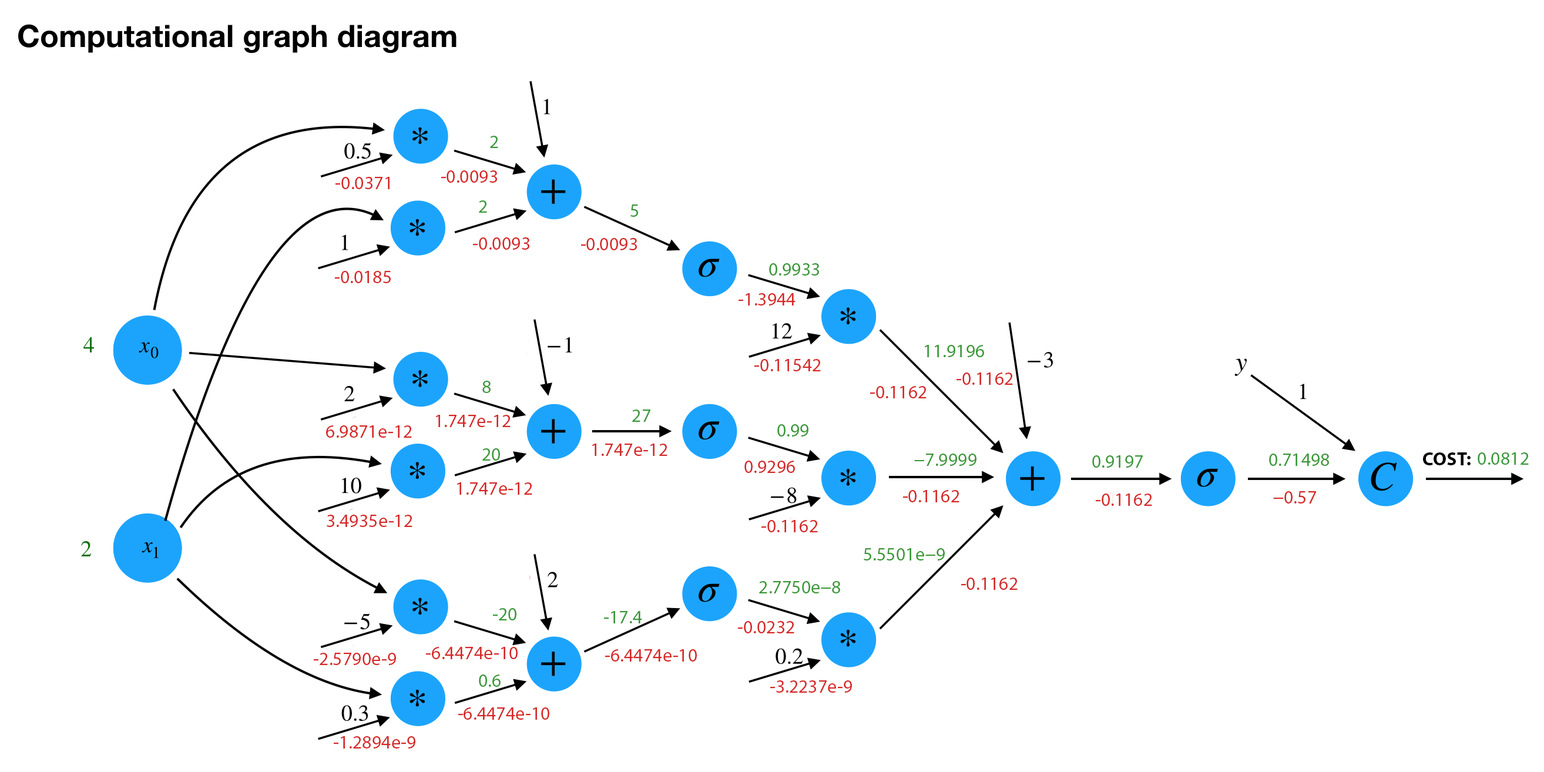
<style>
.page{position:relative;width:1544px;height:772px;background:#ffffff}
.page>*{position:absolute;margin:0}
.t1{font:18.8px "MyriadPro-Regular";color:#399837}
.t2{font:18.8px "MyriadPro-Regular";color:#d62727}
.t3{font:18.8px "MyriadPro-Bold";color:#000000}
</style>
<div class="page">
<p class="t1" style="left:490px;top:136px;width:8px;height:12px">2</p>
<p class="t2" style="left:441px;top:170px;width:56px;height:13px">-0.0093</p>
<p class="t2" style="left:336px;top:177px;width:54px;height:12px">-0.0371</p>
<p class="t1" style="left:479px;top:200px;width:8px;height:13px">2</p>
<p class="t1" style="left:631px;top:204px;width:7px;height:13px">5</p>
<p class="t2" style="left:473px;top:237px;width:56px;height:13px">-0.0093</p>
<p class="t2" style="left:581px;top:238px;width:56px;height:12px">-0.0093</p>
<p class="t1" style="left:769px;top:263px;width:50px;height:13px">0.9933</p>
<p class="t2" style="left:335px;top:271px;width:56px;height:12px">-0.0185</p>
<p class="t2" style="left:739px;top:293px;width:57px;height:13px">-1.3944</p>
<p class="t1" style="left:925px;top:345px;width:59px;height:12px">11.9196</p>
<p class="t2" style="left:755px;top:359px;width:66px;height:12px">-0.11542</p>
<p class="t2" style="left:957px;top:373px;width:56px;height:12px">-0.1162</p>
<p class="t1" style="left:482px;top:381px;width:9px;height:12px">8</p>
<p class="t2" style="left:870px;top:386px;width:57px;height:12px">-0.1162</p>
<p class="t1" style="left:632px;top:410px;width:19px;height:12px">27</p>
<p class="t2" style="left:326px;top:425px;width:86px;height:13px">6.9871e-12</p>
<p class="t2" style="left:436px;top:415px;width:75px;height:12px">1.747e-12</p>
<p class="t1" style="left:777px;top:424px;width:32px;height:13px">0.99</p>
<p class="t1" style="left:482px;top:448px;width:18px;height:13px">20</p>
<p class="t2" style="left:592px;top:444px;width:76px;height:12px">1.747e-12</p>
<p class="t2" style="left:745px;top:461px;width:50px;height:12px">0.9296</p>
<p class="t1" style="left:914px;top:454px;width:63px;height:12px">−7.9999</p>
<p class="t1" style="left:1092px;top:455px;width:51px;height:13px">0.9197</p>
<p class="t1" style="left:1269px;top:454px;width:60px;height:12px">0.71498</p>
<p class="t3" style="left:1423px;top:452px;width:48px;height:13px">COST:</p>
<p class="t1" style="left:1478px;top:452px;width:51px;height:13px">0.0812</p>
<p class="t2" style="left:457px;top:482px;width:75px;height:13px">1.747e-12</p>
<p class="t2" style="left:903px;top:490px;width:57px;height:12px">-0.1162</p>
<p class="t2" style="left:1096px;top:494px;width:56px;height:12px">-0.1162</p>
<p class="t2" style="left:1273px;top:491px;width:43px;height:13px">−0.57</p>
<p class="t2" style="left:327px;top:515px;width:86px;height:12px">3.4935e-12</p>
<p class="t2" style="left:762px;top:520px;width:56px;height:12px">-0.1162</p>
<p class="t1" style="left:864px;top:548px;width:81px;height:13px">5.5501e−9</p>
<p class="t1" style="left:759px;top:581px;width:81px;height:13px">2.7750e−8</p>
<p class="t2" style="left:961px;top:578px;width:57px;height:12px">-0.1162</p>
<p class="t1" style="left:493px;top:608px;width:24px;height:13px">-20</p>
<p class="t1" style="left:604px;top:611px;width:38px;height:12px">-17.4</p>
<p class="t2" style="left:738px;top:621px;width:56px;height:12px">-0.0232</p>
<p class="t2" style="left:314px;top:653px;width:82px;height:12px">-2.5790e-9</p>
<p class="t2" style="left:426px;top:647px;width:92px;height:12px">-6.4474e-10</p>
<p class="t2" style="left:605px;top:649px;width:92px;height:13px">-6.4474e-10</p>
<p class="t1" style="left:479px;top:675px;width:22px;height:12px">0.6</p>
<p class="t2" style="left:770px;top:680px;width:82px;height:13px">-3.2237e-9</p>
<p class="t2" style="left:458px;top:708px;width:91px;height:12px">-6.4474e-10</p>
<p class="t2" style="left:334px;top:736px;width:81px;height:13px">-1.2894e-9</p>
</div>
